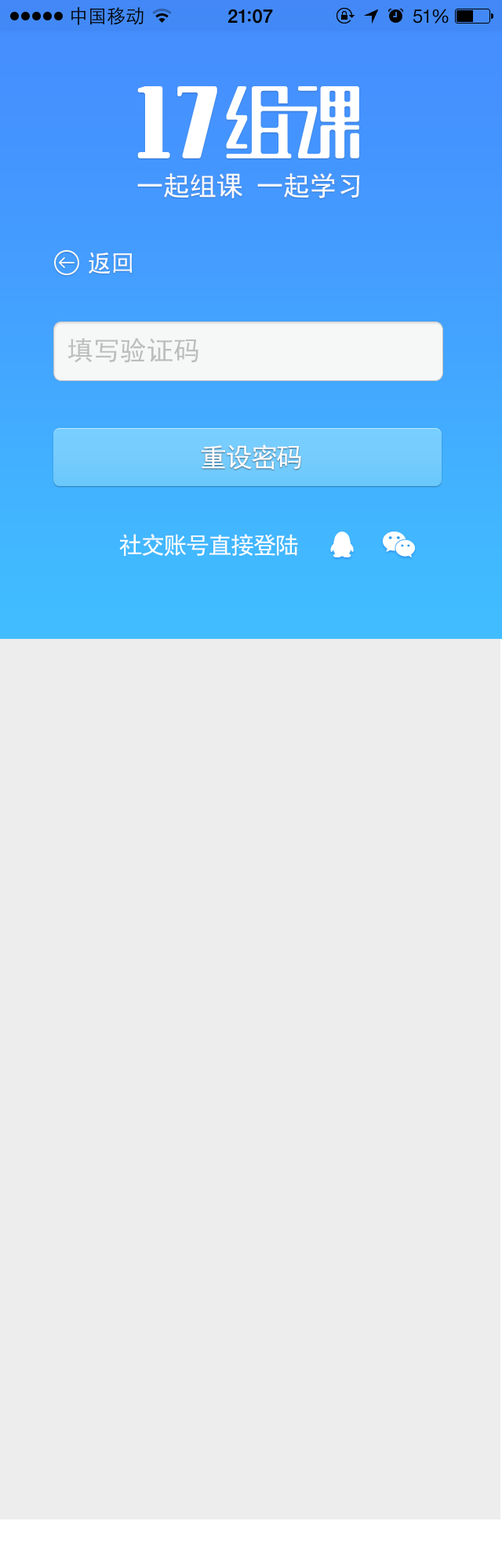
<style>
.page{position:relative;width:502px;height:1568px;background:#ededed}
.page>*{position:absolute;margin:0}
.t1{font:26.7px "SimHei";color:#fbfbfb}
.t2{font:23.5px "SimHei";color:#fefefe}
.t3{font:26.7px "SimHei";color:#bdbdbd}
.t4{font:26.7px "SimHei";letter-spacing:-0.05em;color:#fefefe}
.t5{font:23.5px "SimHei";letter-spacing:-0.05em;color:#fefefe}
</style>
<div class="page">
<p class="t1" style="left:137px;top:172px;width:223px;height:26px">一起组课 一起学习</p>
<p class="t2" style="left:89px;top:252px;width:43px;height:22px">返回</p>
<p class="t3" style="left:67px;top:338px;width:131px;height:25px">填写验证码</p>
<p class="t4" style="left:201px;top:445px;width:100px;height:25px">重设密码</p>
<p class="t5" style="left:119px;top:534px;width:179px;height:23px">社交账号直接登陆</p>
</div>
